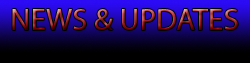
<style>
.page{position:relative;width:250px;height:63px}
.page>*{position:absolute;margin:0}
.t1{font:31px "MyriadPro-Regular"}
</style>
<div class="page">
<p class="t1" style="left:12px;top:9px;width:226px;height:21px">NEWS &amp; UPDATES</p>
</div>
